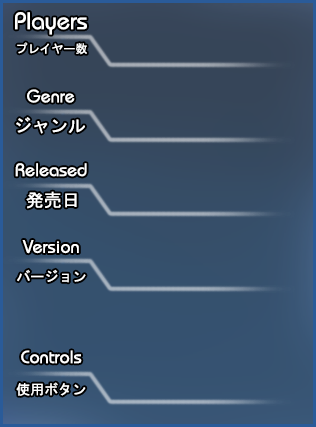
<style>
.page{position:relative;width:316px;height:427px}
.page>*{position:absolute;margin:0}
.t1{font:24px "ITCBauhaus-Medium";color:#ffffff}
.t2{font:12px "MS-Gothic";color:#ffffff}
.t3{font:18px "ITCBauhaus-Medium";color:#ffffff}
.t4{font:18px "MS-Gothic";color:#ffffff}
.t5{font:14px "MS-Gothic";color:#ffffff}
</style>
<div class="page">
<p class="t1" style="left:15px;top:12px;width:72px;height:23px">Players</p>
<p class="t2" style="left:17px;top:42px;width:70px;height:13px">プレイヤー数</p>
<p class="t3" style="left:27px;top:89px;width:48px;height:14px">Genre</p>
<p class="t4" style="left:16px;top:117px;width:69px;height:17px">ジャンル</p>
<p class="t3" style="left:15px;top:163px;width:72px;height:14px">Released</p>
<p class="t4" style="left:26px;top:191px;width:51px;height:18px">発売日</p>
<p class="t3" style="left:22px;top:240px;width:57px;height:14px">Version</p>
<p class="t5" style="left:17px;top:269px;width:69px;height:14px">バージョン</p>
<p class="t3" style="left:21px;top:350px;width:61px;height:14px">Controls</p>
<p class="t5" style="left:16px;top:382px;width:70px;height:14px">使用ボタン</p>
</div>
